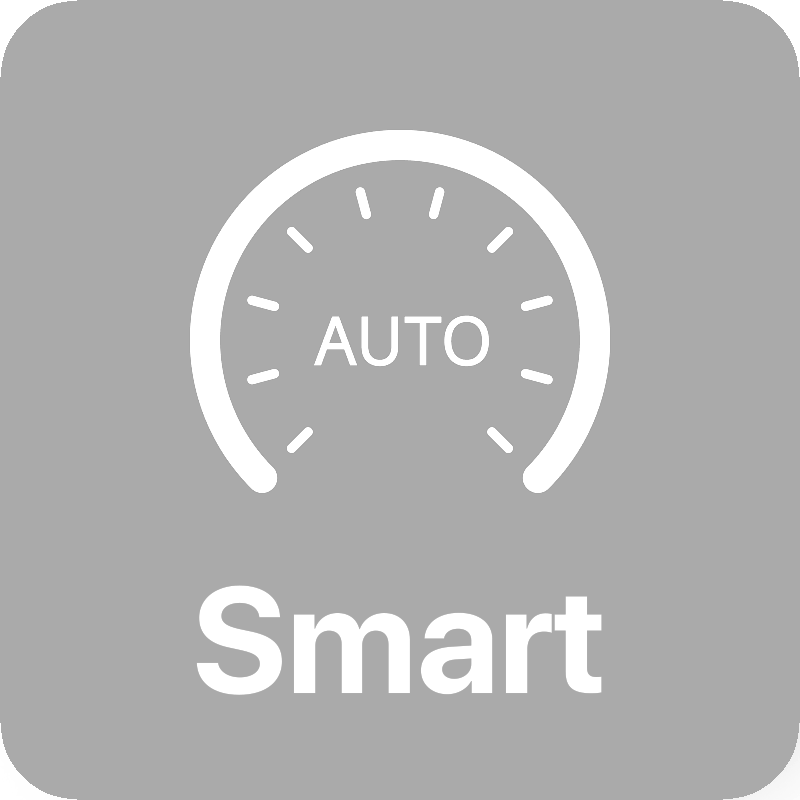
<style>
.page{position:relative;width:800px;height:800px;background:#aaaaaa}
.page>*{position:absolute;margin:0}
.t1{font:150px "SFProDisplay-Bold";color:#ffffff}
</style>
<div class="page">
<p class="t1" style="left:196px;top:585px;width:406px;height:110px">Smart</p>
<p class="t1" style="left:196px;top:585px;width:406px;height:110px">Smart</p>
</div>
